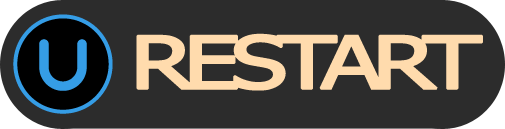
<style>
.page{position:relative;width:505px;height:129px;background:#2c2c2c}
.page>*{position:absolute;margin:0}
.t1{font:72px "Tahoma";letter-spacing:-0.12em;color:#ffdbad;font-weight:bold;scale:1.4 1}
</style>
<div class="page">
<p class="t1" style="left:136px;top:33px;width:347px;height:58px">RESTART</p>
</div>
